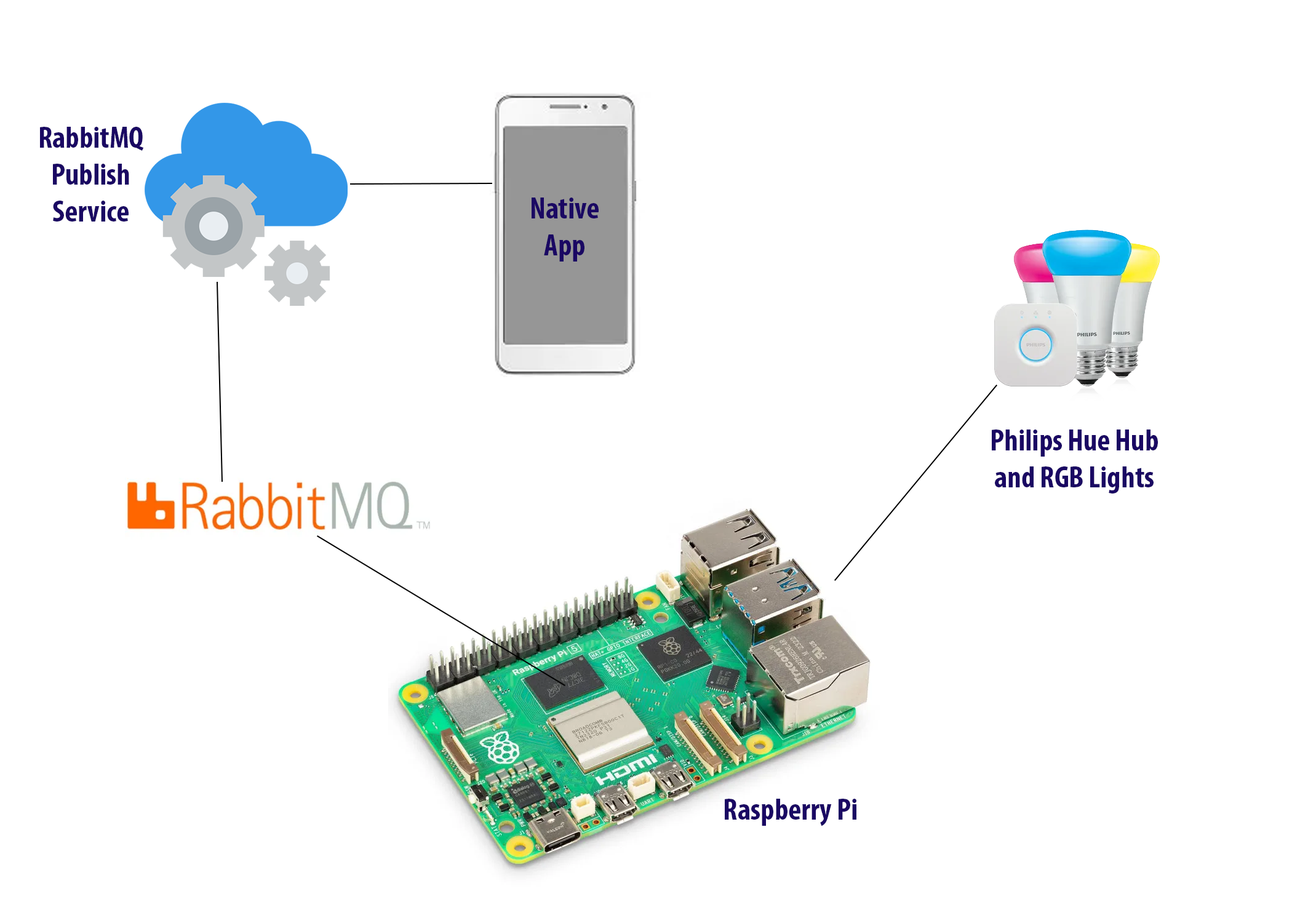
<style>
.page{position:relative;width:1292px;height:923px;background:#ffffff}
.page>*{position:absolute;margin:0}
.t1{font:30.8px "MyriadPro-BoldCond";color:#1a0863}
</style>
<div class="page">
<p class="t1" style="left:40px;top:127px;width:104px;height:94px;text-align:center">RabbitMQ<br>Publish<br>Service</p>
<p class="t1" style="left:532px;top:197px;width:67px;height:64px;text-align:center">Native<br>App</p>
<p class="t1" style="left:992px;top:429px;width:166px;height:64px;text-align:center">Philips Hue Hub<br>and RGB Lights</p>
<p class="t1" style="left:725px;top:799px;width:131px;height:27px">Raspberry Pi</p>
</div>
